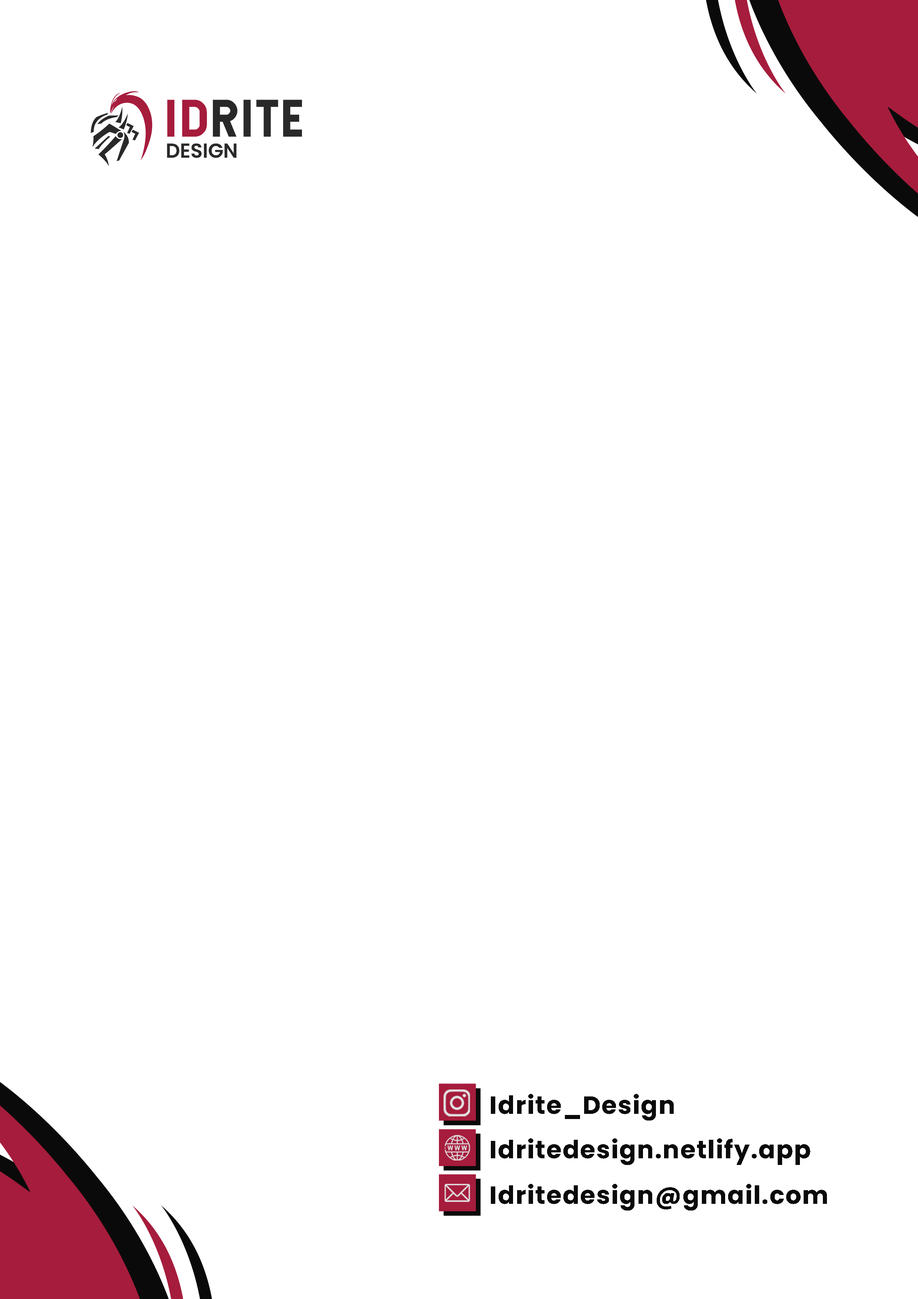
<style>
.page{position:relative;width:918px;height:1299px;background:#ffffff}
.page>*{position:absolute;margin:0}
.t1{font:24.7px "Poppins-Bold";letter-spacing:0.04em;color:#0a0a0a}
</style>
<div class="page">
<p class="t1" style="left:491px;top:1094px;width:183px;height:26px">Idrite_Design</p>
<p class="t1" style="left:491px;top:1138px;width:319px;height:27px">Idritedesign.netlify.app</p>
<p class="t1" style="left:491px;top:1184px;width:336px;height:26px">Idritedesign@gmail.com</p>
</div>
